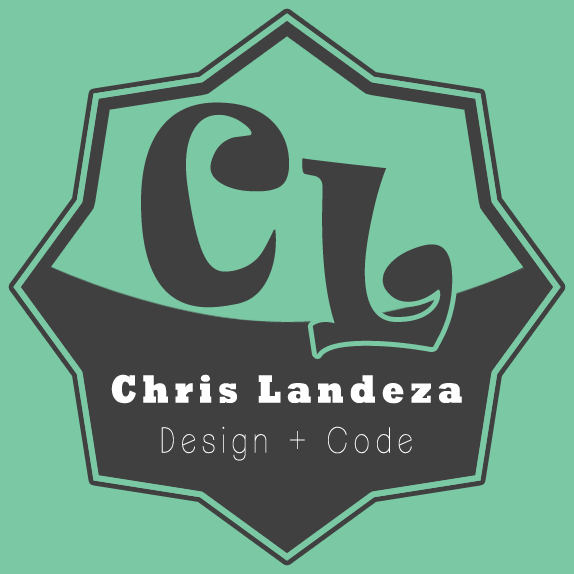
<style>
.page{position:relative;width:574px;height:574px;background:#7bc8a4}
.page>*{position:absolute;margin:0}
.t1{font:247.5px "Ravie";letter-spacing:0.005em;color:#404040;scale:0.83 1}
.t2{font:227.5px "Ravie";letter-spacing:0.005em;color:#404040;scale:0.83 1}
.t3{font:40px "Rockwell-ExtraBold";letter-spacing:0.165em;color:#ffffff;scale:0.83 1}
.t4{font:35px "ClementePDaa-Hairline";letter-spacing:0.22em;color:#ffffff;scale:0.83 1}
</style>
<div class="page">
<p class="t1" style="left:141px;top:102px;width:148px;height:206px">C</p>
<p class="t2" style="left:302px;top:158px;width:151px;height:197px">L</p>
<p class="t3" style="left:111px;top:374px;width:351px;height:30px">Chris Landeza</p>
<p class="t4" style="left:161px;top:426px;width:251px;height:35px">Design + Code</p>
</div>
